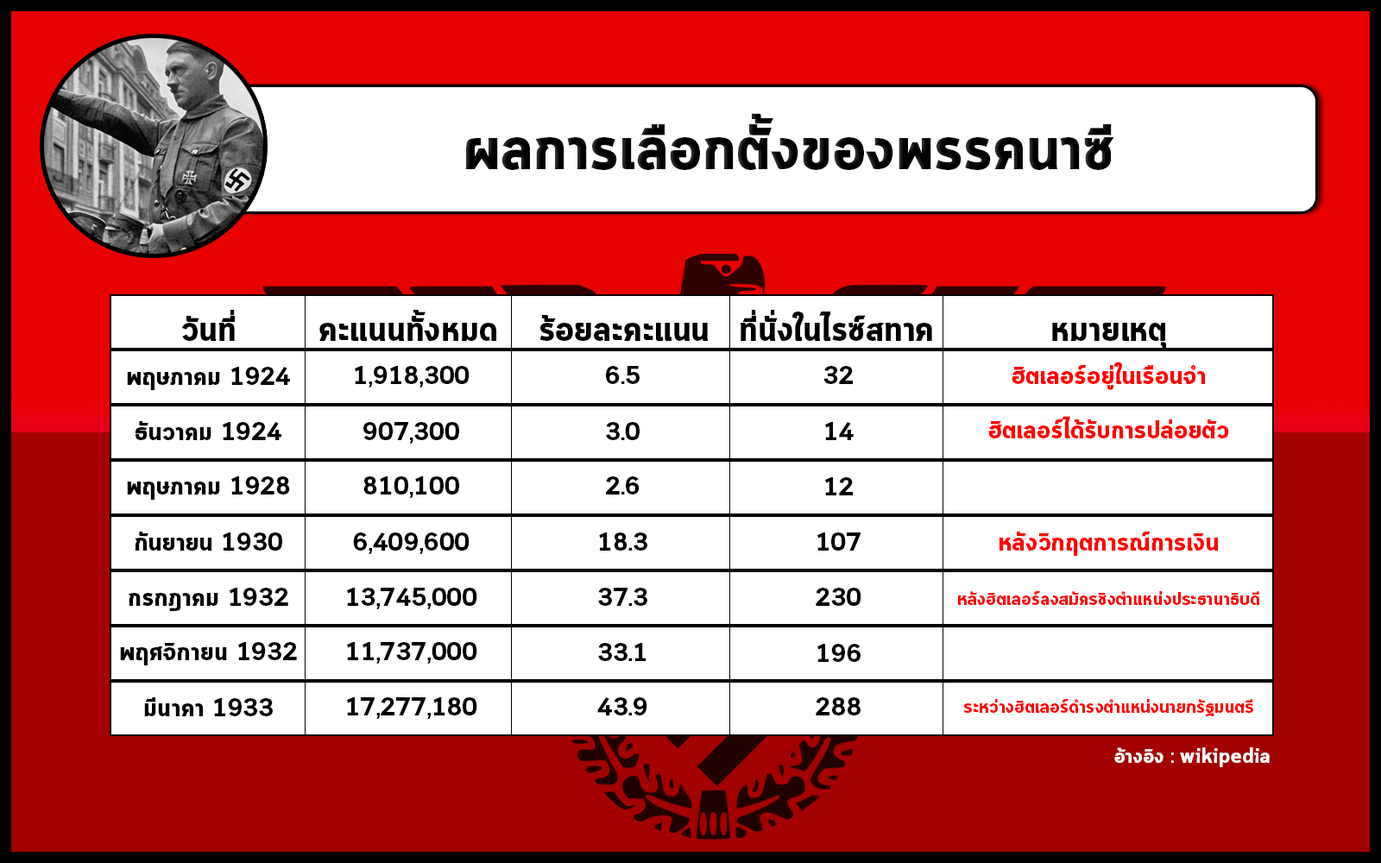
<style>
.page{position:relative;width:1381px;height:863px;background:#ffffff}
.page>*{position:absolute;margin:0}
.t1{font:62.2px "Cloud-Bold";color:#000000}
.t2{font:34.8px "Cloud-Bold";color:#000000}
.t3{font:25.9px "Cloud-Bold";color:#ff0000}
.t4{font:25.9px "Cloud-Bold";color:#000000}
.t5{font:18.5px "Cloud-Bold";color:#ff0000}
.t6{font:20.7px "Cloud-Bold";color:#ffffff}
</style>
<div class="page">
<p class="t1" style="left:466px;top:113px;width:649px;height:57px">ผลการเลือกตั้งของพรรคนาซี</p>
<p class="t2" style="left:181px;top:310px;width:54px;height:31px">วันที่</p>
<p class="t2" style="left:319px;top:310px;width:177px;height:31px">คะแนนทั้งหมด</p>
<p class="t2" style="left:540px;top:315px;width:169px;height:26px">ร้อยละคะแนน</p>
<p class="t2" style="left:740px;top:310px;width:192px;height:31px">ที่นั่งในไรซ์สทาค</p>
<p class="t2" style="left:1052px;top:323px;width:114px;height:26px">หมายเหตุ</p>
<p class="t3" style="left:1012px;top:362px;width:193px;height:28px">ฮิตเลอร์อยู่ในเรือนจำ</p>
<p class="t4" style="left:127px;top:367px;width:163px;height:23px">พฤษภาคม 1924</p>
<p class="t4" style="left:355px;top:366px;width:115px;height:22px">1,918,300</p>
<p class="t4" style="left:606px;top:366px;width:34px;height:18px">6.5</p>
<p class="t4" style="left:824px;top:366px;width:29px;height:18px">32</p>
<p class="t4" style="left:136px;top:421px;width:145px;height:19px">ธันวาคม 1924</p>
<p class="t4" style="left:363px;top:422px;width:96px;height:22px">907,300</p>
<p class="t4" style="left:606px;top:422px;width:34px;height:18px">3.0</p>
<p class="t4" style="left:825px;top:422px;width:29px;height:18px">14</p>
<p class="t3" style="left:988px;top:416px;width:241px;height:23px">ฮิตเลอร์ได้รับการปล่อยตัว</p>
<p class="t4" style="left:127px;top:477px;width:163px;height:23px">พฤษภาคม 1928</p>
<p class="t4" style="left:363px;top:477px;width:96px;height:21px">810,100</p>
<p class="t4" style="left:606px;top:477px;width:34px;height:18px">2.6</p>
<p class="t4" style="left:825px;top:477px;width:28px;height:19px">12</p>
<p class="t4" style="left:135px;top:532px;width:147px;height:19px">กันยายน 1930</p>
<p class="t4" style="left:353px;top:533px;width:117px;height:21px">6,409,600</p>
<p class="t4" style="left:599px;top:533px;width:48px;height:18px">18.3</p>
<p class="t4" style="left:818px;top:533px;width:43px;height:18px">107</p>
<p class="t3" style="left:1000px;top:532px;width:219px;height:24px">หลังวิกฤตการณ์การเงิน</p>
<p class="t4" style="left:129px;top:588px;width:159px;height:23px">กรกฎาคม 1932</p>
<p class="t4" style="left:347px;top:588px;width:130px;height:21px">13,745,000</p>
<p class="t4" style="left:598px;top:588px;width:49px;height:18px">37.3</p>
<p class="t4" style="left:816px;top:588px;width:46px;height:18px">230</p>
<p class="t5" style="left:958px;top:591px;width:302px;height:14px">หลังฮิตเลอร์ลงสมัครชิงตำแหน่งประธานาธิบดี</p>
<p class="t4" style="left:120px;top:642px;width:177px;height:24px">พฤศจิกายน 1932</p>
<p class="t4" style="left:347px;top:642px;width:130px;height:22px">11,737,000</p>
<p class="t4" style="left:598px;top:643px;width:49px;height:18px">33.1</p>
<p class="t4" style="left:818px;top:644px;width:43px;height:18px">196</p>
<p class="t4" style="left:144px;top:698px;width:129px;height:19px">มีนาคา 1933</p>
<p class="t4" style="left:347px;top:698px;width:130px;height:21px">17,277,180</p>
<p class="t4" style="left:597px;top:698px;width:50px;height:18px">43.9</p>
<p class="t4" style="left:816px;top:698px;width:45px;height:18px">288</p>
<p class="t5" style="left:963px;top:699px;width:290px;height:18px">ระหว่างฮิตเลอร์ดำรงตำแหน่งนายกรัฐมนตรี</p>
<p class="t6" style="left:1115px;top:748px;width:155px;height:19px">อ้างอิง : wikipedia</p>
</div>
